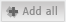
<style>
.page{position:relative;width:66px;height:22px}
.page>*{position:absolute;margin:0}
.t1{font:11.2px "Tahoma";letter-spacing:0.1em;color:#8d8d8d;scale:0.86 1}
</style>
<div class="page">
<p class="t1" style="left:22px;top:6px;width:35px;height:9px">Add all</p>
</div>
